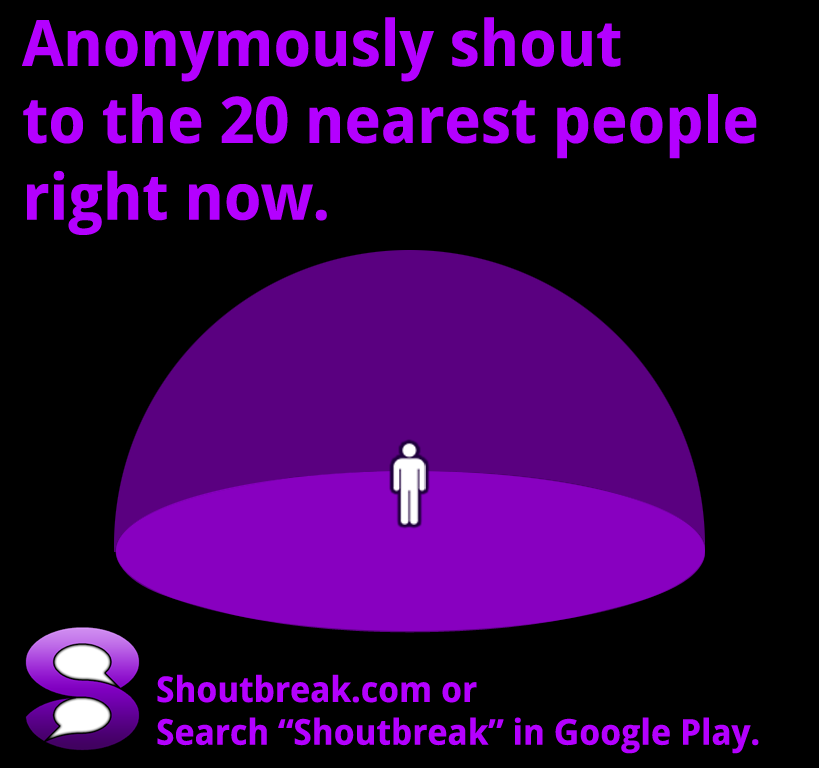
<style>
.page{position:relative;width:819px;height:768px;background:#000000}
.page>*{position:absolute;margin:0}
.t1{font:64px "DroidSans-Bold";letter-spacing:-0.01em;color:#b400ff}
.t2{font:35.6px "DroidSans-Bold";letter-spacing:-0.01em;color:#b400ff}
</style>
<div class="page">
<p class="t1" style="left:22px;top:17px;width:735px;height:218px">Anonymously shout<br>to the 20 nearest people <br>right now.</p>
<p class="t2" style="left:157px;top:674px;width:602px;height:80px">Shoutbreak.com or <br>Search “Shoutbreak” in Google Play.</p>
</div>
